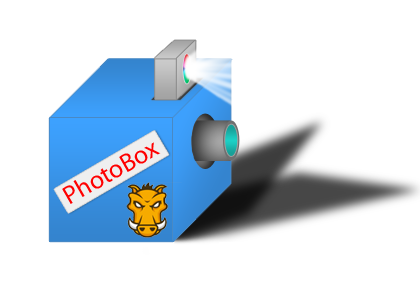
<style>
.page{position:relative;width:420px;height:300px;background:#ffffff}
.page>*{position:absolute;margin:0}
.t1{font:25.9px "MyriadPro-Regular";color:#ff0000}
</style>
<div class="page">
<p class="t1" style="left:62px;top:142px;width:99px;height:62px;rotate:-30deg">PhotoBox</p>
</div>
